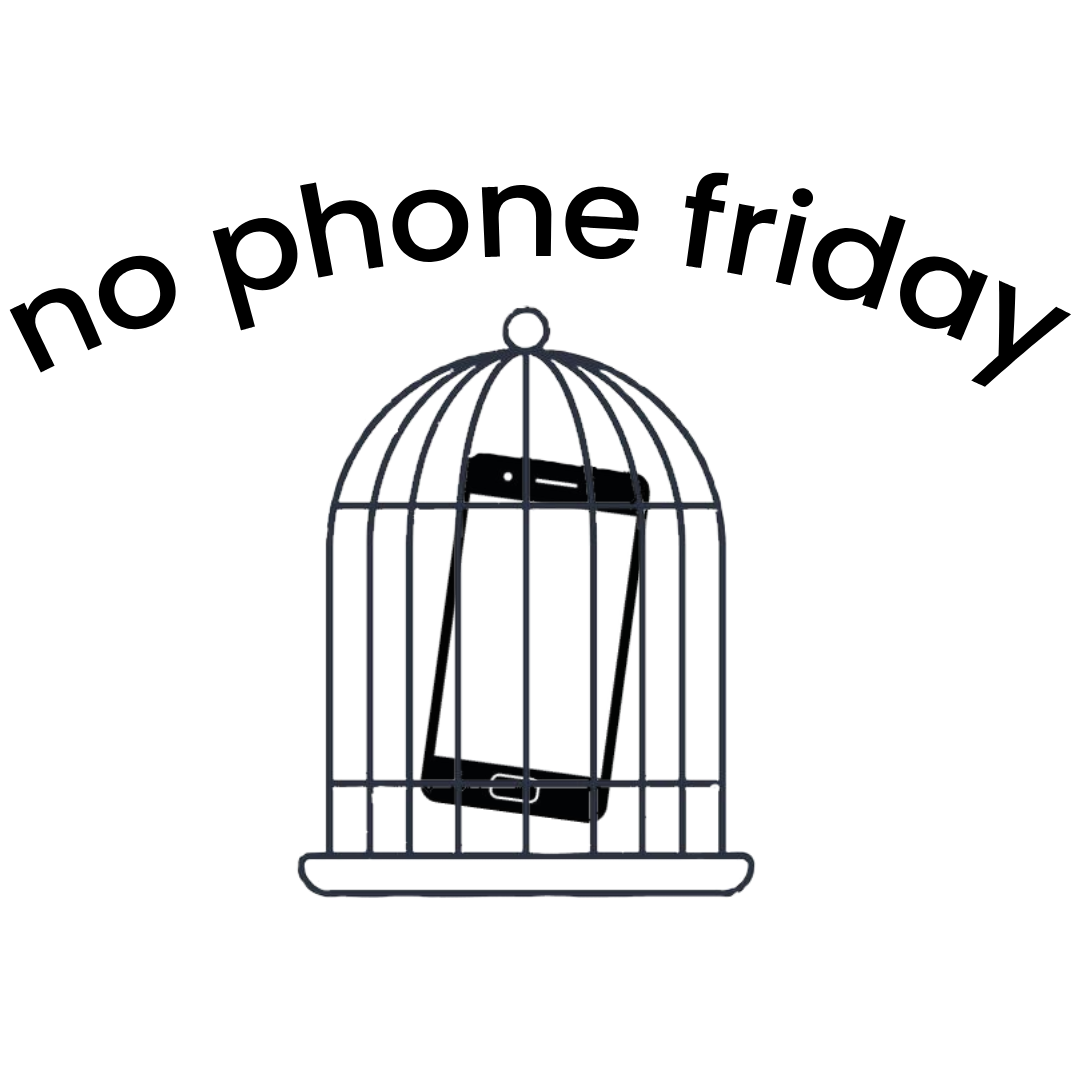
<style>
.page{position:relative;width:1080px;height:1080px;background:#ffffff}
.page>*{position:absolute;margin:0}
.t1{font:126.8px "Poppins-Medium";color:#000000}
</style>
<div class="page">
<p class="t1" style="left:9px;top:172px;width:1062px;height:215px">no phone friday</p>
</div>
